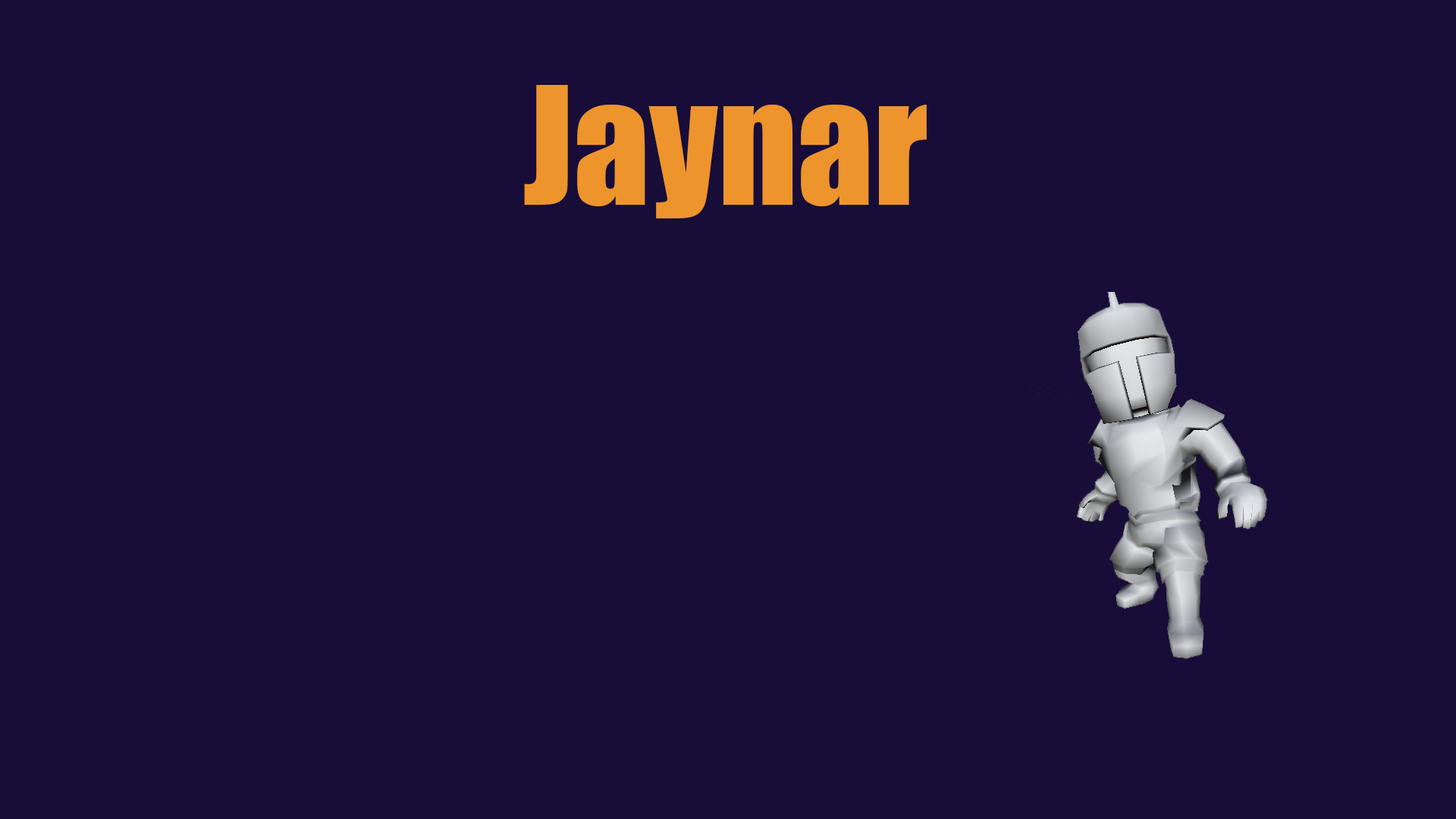
<style>
.page{position:relative;width:1456px;height:819px;background:#170d38}
.page>*{position:absolute;margin:0}
.t1{font:151.7px "Impact";color:#ed942c}
</style>
<div class="page">
<p class="t1" style="left:524px;top:85px;width:403px;height:133px">Jaynar</p>
</div>
